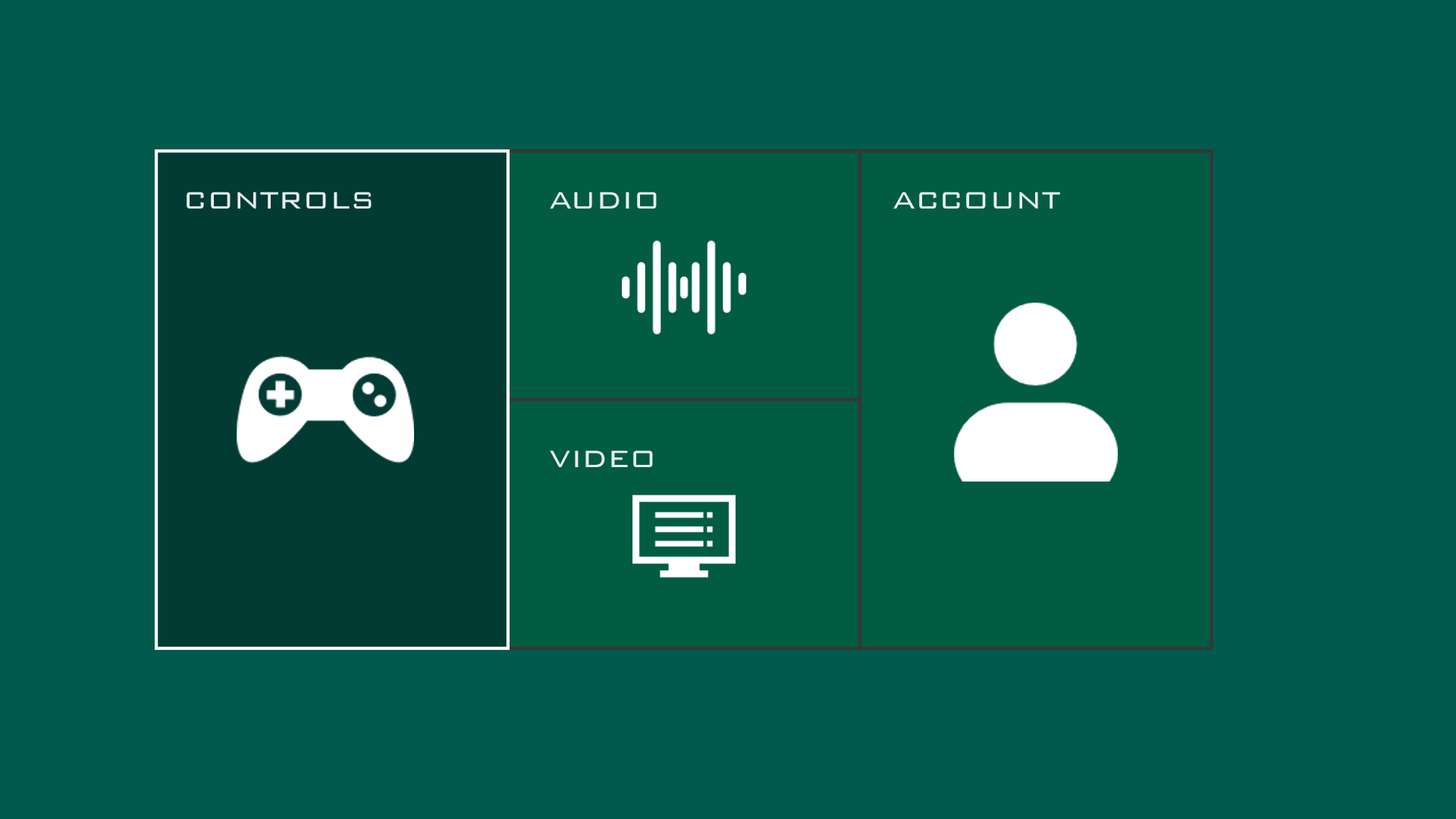
<style>
.page{position:relative;width:1456px;height:819px;background:#015a4e}
.page>*{position:absolute;margin:0}
.t1{font:31.6px "BankGothic";color:#e4eff1}
</style>
<div class="page">
<p class="t1" style="left:187px;top:192px;width:185px;height:17px">CONTROLS</p>
<p class="t1" style="left:550px;top:192px;width:107px;height:17px">AUDIO</p>
<p class="t1" style="left:893px;top:192px;width:167px;height:17px">ACCOUNT</p>
<p class="t1" style="left:550px;top:450px;width:103px;height:17px">VIDEO</p>
</div>
